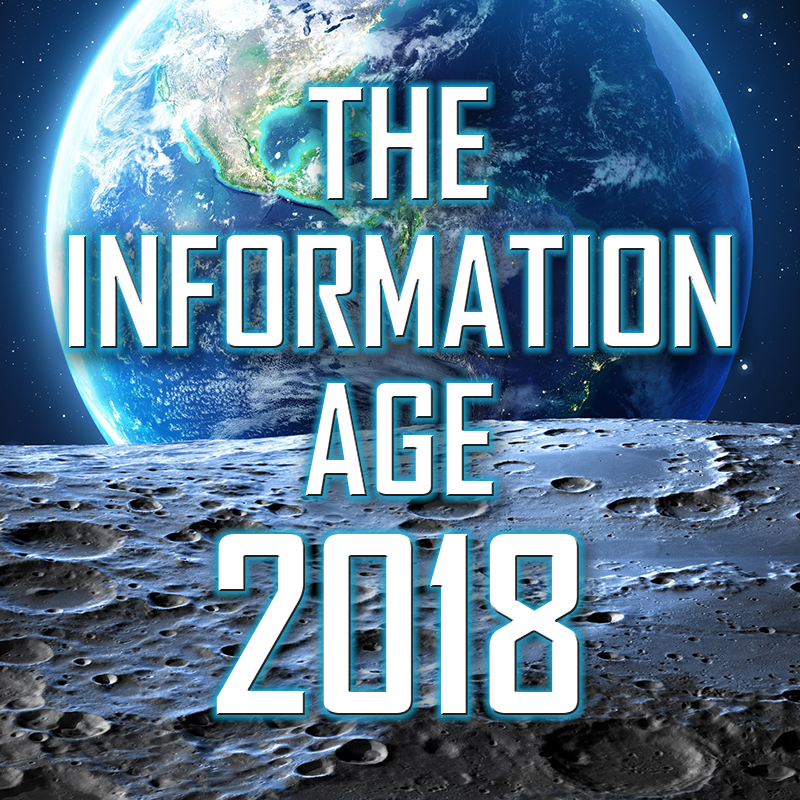
<style>
.page{position:relative;width:800px;height:800px}
.page>*{position:absolute;margin:0}
.t1{font:148.2px/148.2px "AgencyFB-Bold";color:#ffffff}
.t2{font:236.9px "AgencyFB-Bold";color:#ffffff}
</style>
<div class="page">
<p class="t1" style="left:69px;top:87px;width:664px;height:409px;text-align:center">THE<br>INFORMATION<br>AGE</p>
<p class="t2" style="left:216px;top:534px;width:364px;height:181px">2018</p>
</div>
